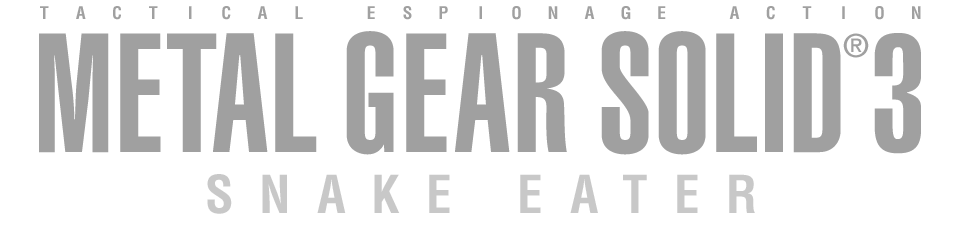
<style>
.page{position:relative;width:960px;height:246px;background:#ffffff}
.page>*{position:absolute;margin:0}
.t1{font:16.9px "Helvetica-Condensed-Bold";letter-spacing:0.048em;color:#a0a0a0;scale:1.05 1}
.t2{font:166.5px "Helvetica-UltraCompressed";letter-spacing:0.048em;color:#a0a0a0}
.t3{font:32.3px "Helvetica-UltraCompressed";letter-spacing:0.048em;color:#a0a0a0}
.t4{font:165.3px "Helvetica-UltraCompressed";letter-spacing:0.048em;color:#a0a0a0}
.t5{font:51.1px "Helvetica-Condensed-Bold";letter-spacing:0.5em;color:#c8c8c8}
.t6{font:51.1px "Helvetica-Condensed-Bold";letter-spacing:0.525em;color:#c8c8c8}
</style>
<div class="page">
<p class="t1" style="left:40px;top:6px;width:9px;height:13px">T</p>
<p class="t1" style="left:76px;top:6px;width:10px;height:13px">A</p>
<p class="t1" style="left:113px;top:6px;width:8px;height:14px">C</p>
<p class="t1" style="left:149px;top:6px;width:9px;height:13px">T</p>
<p class="t1" style="left:189px;top:6px;width:3px;height:13px">I</p>
<p class="t1" style="left:222px;top:6px;width:9px;height:14px">C</p>
<p class="t1" style="left:257px;top:6px;width:11px;height:13px">A</p>
<p class="t1" style="left:295px;top:6px;width:8px;height:13px">L</p>
<p class="t1" style="left:367px;top:6px;width:8px;height:13px">E</p>
<p class="t1" style="left:403px;top:6px;width:9px;height:14px">S</p>
<p class="t1" style="left:439px;top:6px;width:9px;height:13px">P</p>
<p class="t1" style="left:479px;top:6px;width:3px;height:13px">I</p>
<p class="t1" style="left:512px;top:6px;width:9px;height:14px">O</p>
<p class="t1" style="left:548px;top:6px;width:10px;height:13px">N</p>
<p class="t1" style="left:584px;top:6px;width:11px;height:13px">A</p>
<p class="t1" style="left:621px;top:6px;width:10px;height:14px">G</p>
<p class="t1" style="left:658px;top:6px;width:8px;height:13px">E</p>
<p class="t1" style="left:729px;top:6px;width:11px;height:13px">A</p>
<p class="t1" style="left:766px;top:6px;width:9px;height:14px">C</p>
<p class="t1" style="left:802px;top:6px;width:10px;height:13px">T</p>
<p class="t1" style="left:842px;top:6px;width:3px;height:13px">I</p>
<p class="t1" style="left:875px;top:6px;width:9px;height:14px">O</p>
<p class="t1" style="left:912px;top:6px;width:9px;height:13px">N</p>
<p class="t2" style="left:39px;top:33px;width:70px;height:120px">M</p>
<p class="t2" style="left:120px;top:33px;width:41px;height:119px">E</p>
<p class="t2" style="left:167px;top:33px;width:50px;height:119px">T</p>
<p class="t2" style="left:213px;top:33px;width:55px;height:119px">A</p>
<p class="t2" style="left:275px;top:33px;width:42px;height:119px">L</p>
<p class="t2" style="left:346px;top:31px;width:48px;height:124px">G</p>
<p class="t2" style="left:406px;top:33px;width:41px;height:119px">E</p>
<p class="t2" style="left:455px;top:33px;width:55px;height:119px">A</p>
<p class="t2" style="left:517px;top:33px;width:50px;height:119px">R</p>
<p class="t2" style="left:601px;top:31px;width:48px;height:124px">S</p>
<p class="t2" style="left:658px;top:31px;width:48px;height:124px">O</p>
<p class="t2" style="left:716px;top:33px;width:41px;height:119px">L</p>
<p class="t2" style="left:765px;top:33px;width:18px;height:119px">I</p>
<p class="t2" style="left:793px;top:33px;width:48px;height:120px">D</p>
<p class="t3" style="left:843px;top:33px;width:26px;height:25px">®</p>
<p class="t4" style="left:874px;top:33px;width:47px;height:121px">3</p>
<p class="t5" style="left:207px;top:174px;width:243px;height:40px">SNAKE</p>
<p class="t6" style="left:520px;top:174px;width:235px;height:39px">EATER</p>
</div>
